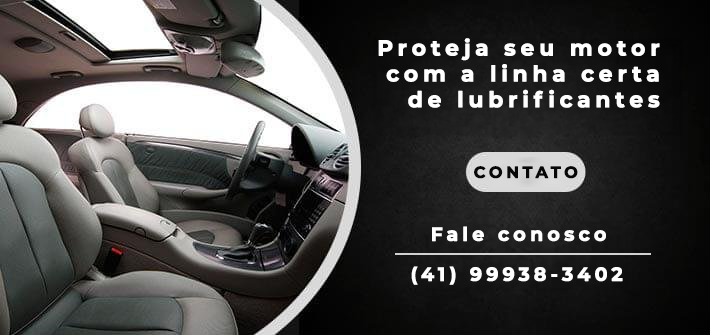
<style>
.page{position:relative;width:710px;height:335px}
.page>*{position:absolute;margin:0}
.t1{font:21.5px "Montserrat-Bold";letter-spacing:0.2em;color:#ffffff;font-weight:bold}
.t2{font:16px "Montserrat-Bold";letter-spacing:0.2em;color:#070707;font-weight:bold}
.t3{font:18.8px "Montserrat-Bold";letter-spacing:0.2em;color:#ffffff;font-weight:bold}
</style>
<div class="page">
<p class="t1" style="left:378px;top:38px;width:282px;height:70px;text-align:right">Proteja seu motor<br> com a linha certa<br>de lubrificantes</p>
<p class="t2" style="left:474px;top:166px;width:104px;height:13px">CONTATO</p>
<p class="t3" style="left:432px;top:226px;width:174px;height:16px">Fale conosco</p>
<p class="t3" style="left:411px;top:266px;width:212px;height:19px">(41) 99938-3402</p>
</div>
